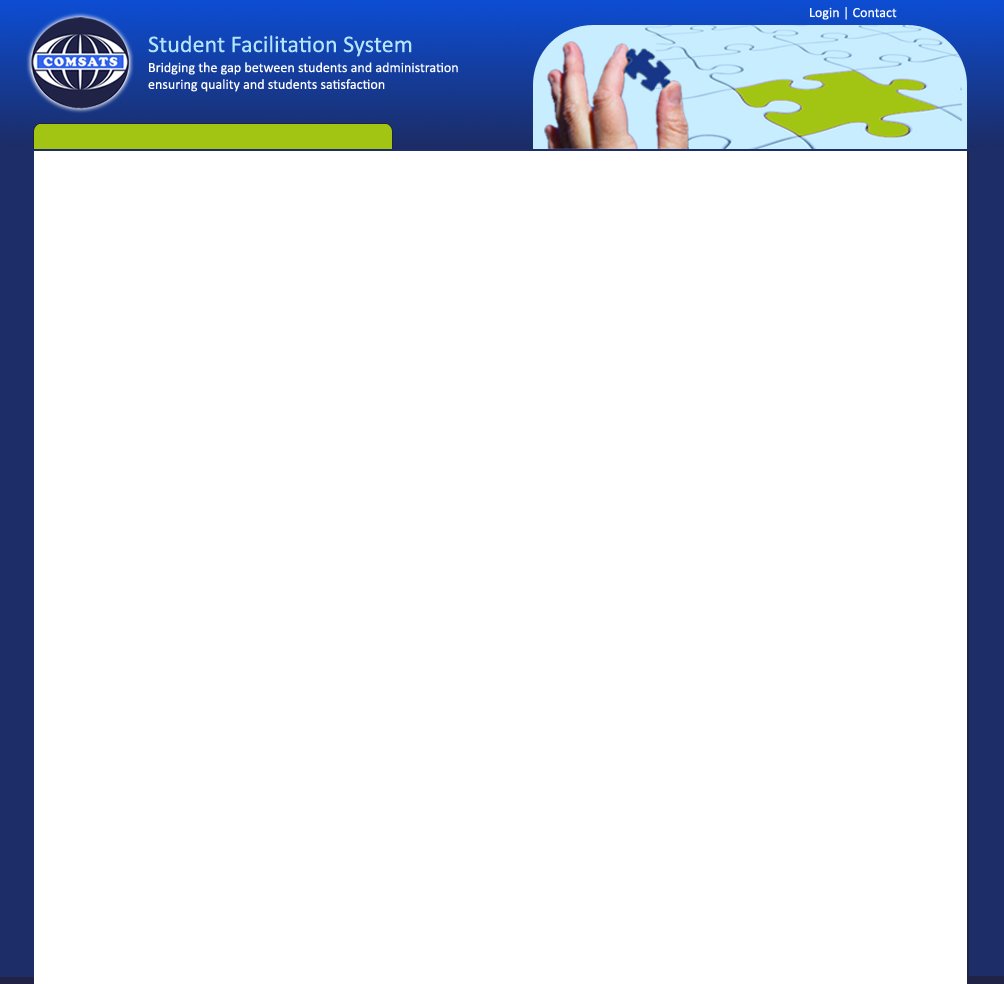
<style>
.page{position:relative;width:1004px;height:984px;background:#ffffff}
.page>*{position:absolute;margin:0}
.t1{font:14px "Calibri";letter-spacing:0.003em;color:#fcfcfc}
.t2{font:24px "Calibri";letter-spacing:0.003em;color:#b4e5fd}
.t3{font:14px "Calibri";letter-spacing:0.003em;color:#fcfcfd}
</style>
<div class="page">
<p class="t1" style="left:810px;top:7px;width:87px;height:13px">Login | Contact</p>
<p class="t2" style="left:148px;top:35px;width:264px;height:22px">Student Facilitation System</p>
<p class="t3" style="left:148px;top:62px;width:310px;height:30px">Bridging the gap between students and administration<br>ensuring quality and students satisfaction</p>
</div>
